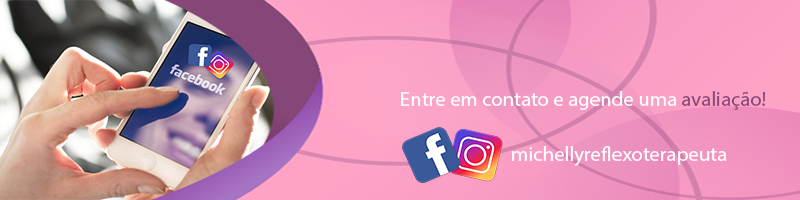
<style>
.page{position:relative;width:800px;height:200px}
.page>*{position:absolute;margin:0}
.t1{font:20.8px "MyriadPro-Regular";color:#ffffff}
.t2{font:20.8px "MyriadPro-Regular";color:#854777}
</style>
<div class="page">
<p class="t1" style="left:401px;top:91px;width:365px;height:19px">Entre em contato e agende uma <span class="t2">avaliação!</span></p>
<p class="t1" style="left:512px;top:146px;width:215px;height:20px">michellyreflexoterapeuta</p>
</div>
